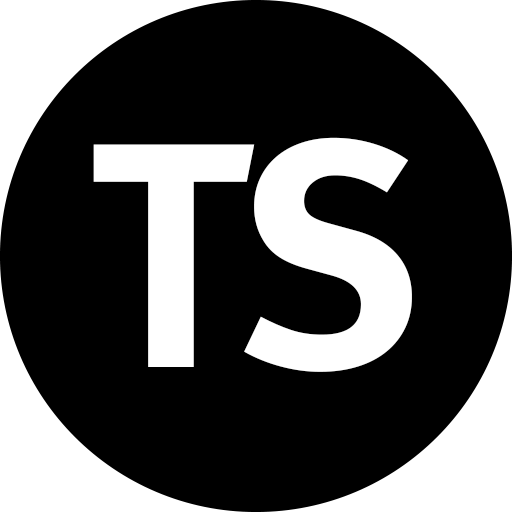
<style>
.page{position:relative;width:512px;height:512px;background:#000000}
.page>*{position:absolute;margin:0}
.t1{font:320px "MetaCompPro-Bold";letter-spacing:-0.05em;color:#ffffff}
</style>
<div class="page">
<p class="t1" style="left:93px;top:137px;width:319px;height:235px">TS</p>
</div>
